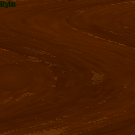
<style>
.page{position:relative;width:135px;height:135px}
.page>*{position:absolute;margin:0}
.t1{font:7.9px "Impact";color:#031f00;scale:1.09 1}
</style>
<div class="page">
<p class="t1" style="left:0px;top:1px;width:16px;height:7px">ilyin</p>
</div>
